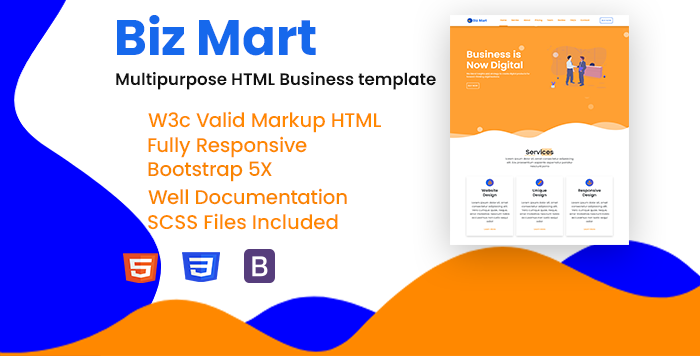
<style>
.page{position:relative;width:700px;height:356px;background:#ffffff}
.page>*{position:absolute;margin:0}
.t1{font:50px "Poppins-Bold";color:#1668ec}
.t2{font:16.7px "Poppins-SemiBold";color:#111111}
.t3{font:19.8px "Poppins-Medium";color:#ff8800}
.t4{font:19.8px "Poppins-Medium";color:#fd8700}
.t5{font:19.8px "Poppins-Medium";color:#f98500}
.t6{font:19.8px "Poppins-Medium";color:#fa8500}
</style>
<div class="page">
<p class="t1" style="left:117px;top:15px;width:199px;height:41px">Biz Mart</p>
<p class="t2" style="left:116px;top:72px;width:320px;height:18px">Multipurpose HTML Business template</p>
<p class="t3" style="left:148px;top:111px;width:233px;height:22px">W3c Valid Markup HTML</p>
<p class="t4" style="left:148px;top:136px;width:159px;height:22px">Fully Responsive</p>
<p class="t5" style="left:148px;top:161px;width:124px;height:21px">Bootstrap 5X</p>
<p class="t6" style="left:148px;top:188px;width:199px;height:17px">Well Documentation</p>
<p class="t3" style="left:148px;top:213px;width:190px;height:17px">SCSS Files Included</p>
</div>
